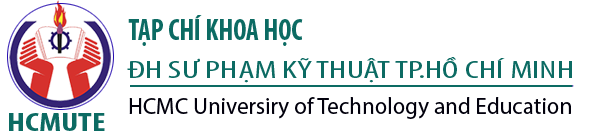
<style>
.page{position:relative;width:590px;height:135px;background:#ffffff}
.page>*{position:absolute;margin:0}
.t1{font:30.6px "MyriadPro-BoldCond";color:#0c6b63;scale:0.92 1}
.t2{font:24.5px "MyriadPro-Cond";color:#0c6b63;scale:1.53 1}
.t3{font:26px "MyriadPro-BoldCond";color:#0c6b63;scale:1.34 1}
</style>
<div class="page">
<p class="t1" style="left:128px;top:15px;width:175px;height:31px">TẠP CHÍ KHOA HỌC</p>
<p class="t2" style="left:127px;top:57px;width:445px;height:26px">ĐH SƯ PHẠM KỸ THUẬT TP.HỒ CHÍ MINH</p>
<p class="t3" style="left:9px;top:113px;width:96px;height:18px">HCMUTE</p>
</div>
